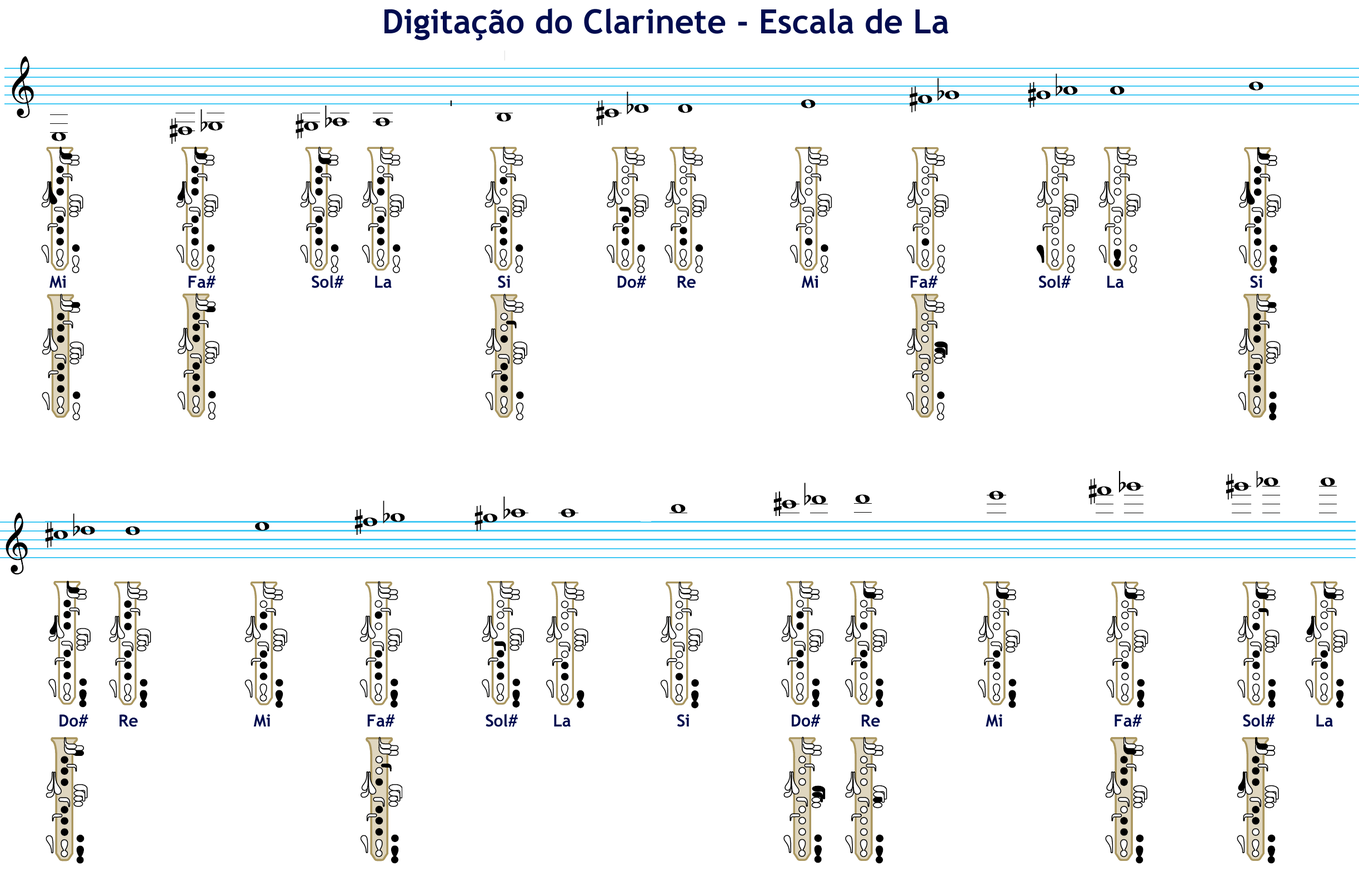
<style>
.page{position:relative;width:1359px;height:877px;background:#ffffff}
.page>*{position:absolute;margin:0}
.t1{font:33.3px "TrebuchetMS-Bold";color:#000c4f}
.t2{font:16.7px "TrebuchetMS-Bold";color:#000c4f}
</style>
<div class="page">
<p class="t1" style="left:385px;top:8px;width:563px;height:33px">Digitação do Clarinete - Escala de La</p>
<p class="t2" style="left:49px;top:275px;width:1213px;height:13px">Mi                        Fa#                   Sol#      La                     Si                     Do#      Re                     Mi                  Fa#                    Sol#       La                         Si</p>
<p class="t2" style="left:59px;top:714px;width:1274px;height:13px">Do#      Re                       Mi                   Fa#                  Sol#       La                     Si                    Do#        Re                     Mi                      Fa#                    Sol#        La</p>
</div>
